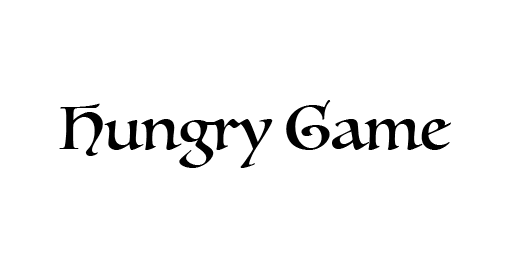
<style>
.page{position:relative;width:525px;height:268px;background:#ffffff}
.page>*{position:absolute;margin:0}
.t1{font:60px "Luminari-Regular";color:#000000}
</style>
<div class="page">
<p class="t1" style="left:59px;top:100px;width:392px;height:68px">Hungry Game</p>
</div>
